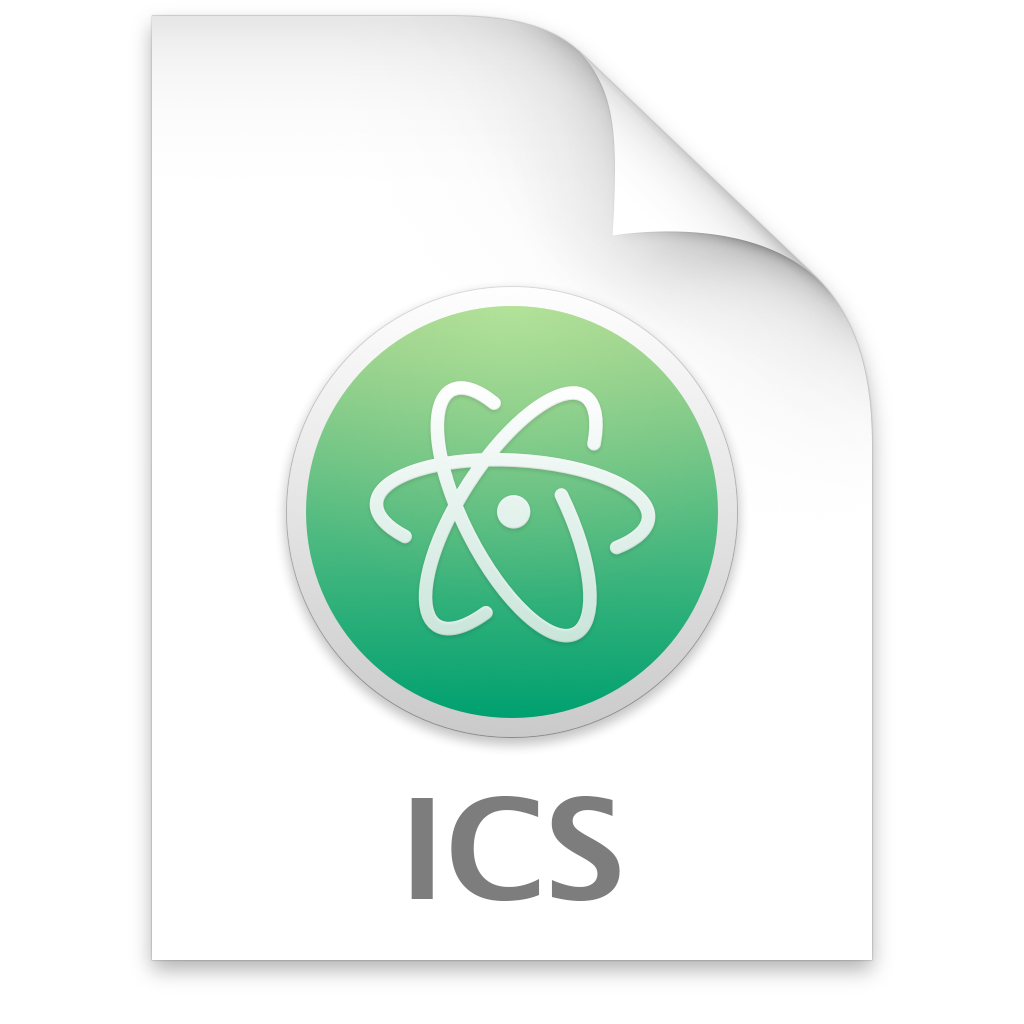
<style>
.page{position:relative;width:1024px;height:1024px;background:#ffffff}
.page>*{position:absolute;margin:0}
.t1{font:140px "LucidaGrande-Bold";color:#7d7d7d}
</style>
<div class="page">
<p class="t1" style="left:411px;top:796px;width:209px;height:105px">ICS</p>
</div>
